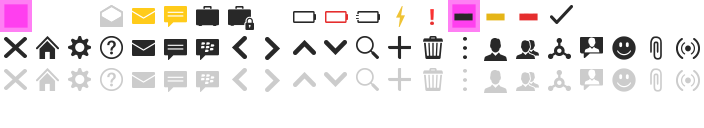
<style>
.page{position:relative;width:704px;height:128px;background:#ffffff}
.page>*{position:absolute;margin:0}
.t1{font:24.8px "Slate-Medium";color:#f63131;scale:1.09 1}
</style>
<div class="page">
<p class="t1" style="left:430px;top:9px;width:4px;height:16px">!</p>
</div>
